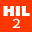
<style>
.page{position:relative;width:32px;height:32px;background:#ff3700}
.page>*{position:absolute;margin:0}
.t1{font:15px "BerlinSansFB-Bold";letter-spacing:0.05em;color:#ffffff}
.t2{font:15px "MerriweatherSans-Book";letter-spacing:0.05em;color:#ffffff}
</style>
<div class="page">
<p class="t1" style="left:3px;top:6px;width:27px;height:10px">HIL</p>
<p class="t2" style="left:12px;top:18px;width:8px;height:10px">2</p>
</div>
